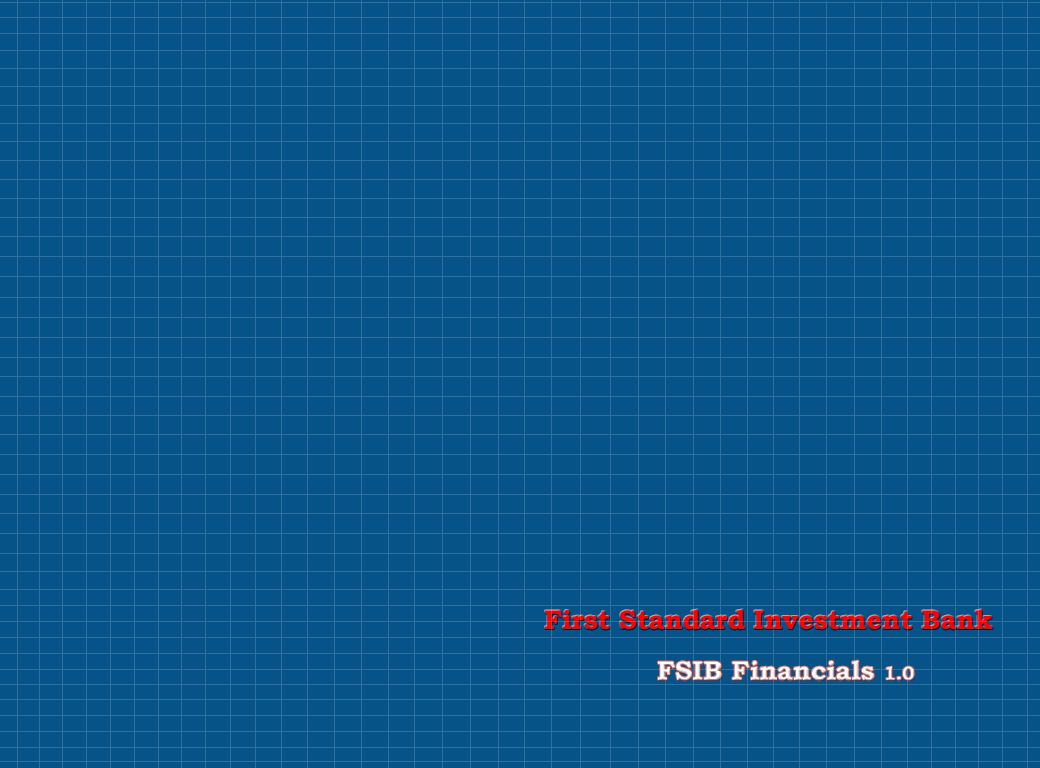
<style>
.page{position:relative;width:1040px;height:768px;background:#065389}
.page>*{position:absolute;margin:0}
.t1{font:26.7px "BookmanOldStyle-Bold";color:#ff0000}
.t2{font:26.7px "BookmanOldStyle-Bold";color:#ffffff}
.t3{font:18.7px "BookmanOldStyle-Bold";color:#ffffff}
</style>
<div class="page">
<p class="t1" style="left:545px;top:609px;width:448px;height:21px">First Standard Investment Bank</p>
<p class="t2" style="left:658px;top:660px;width:257px;height:21px">FSIB Financials <span class="t3">1.0</span></p>
</div>
